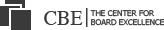
<style>
.page{position:relative;width:164px;height:30px;background:#ffffff}
.page>*{position:absolute;margin:0}
.t1{font:20px "Times-Roman";color:#3a3a3a}
.t2{font:8px "Tahoma";color:#3a3a3a}
</style>
<div class="page">
<p class="t1" style="left:44px;top:11px;width:39px;height:14px">CBE</p>
<p class="t2" style="left:90px;top:10px;width:75px;height:16px">THE CENTER FOR<br>BOARD EXCELLENCE</p>
</div>
